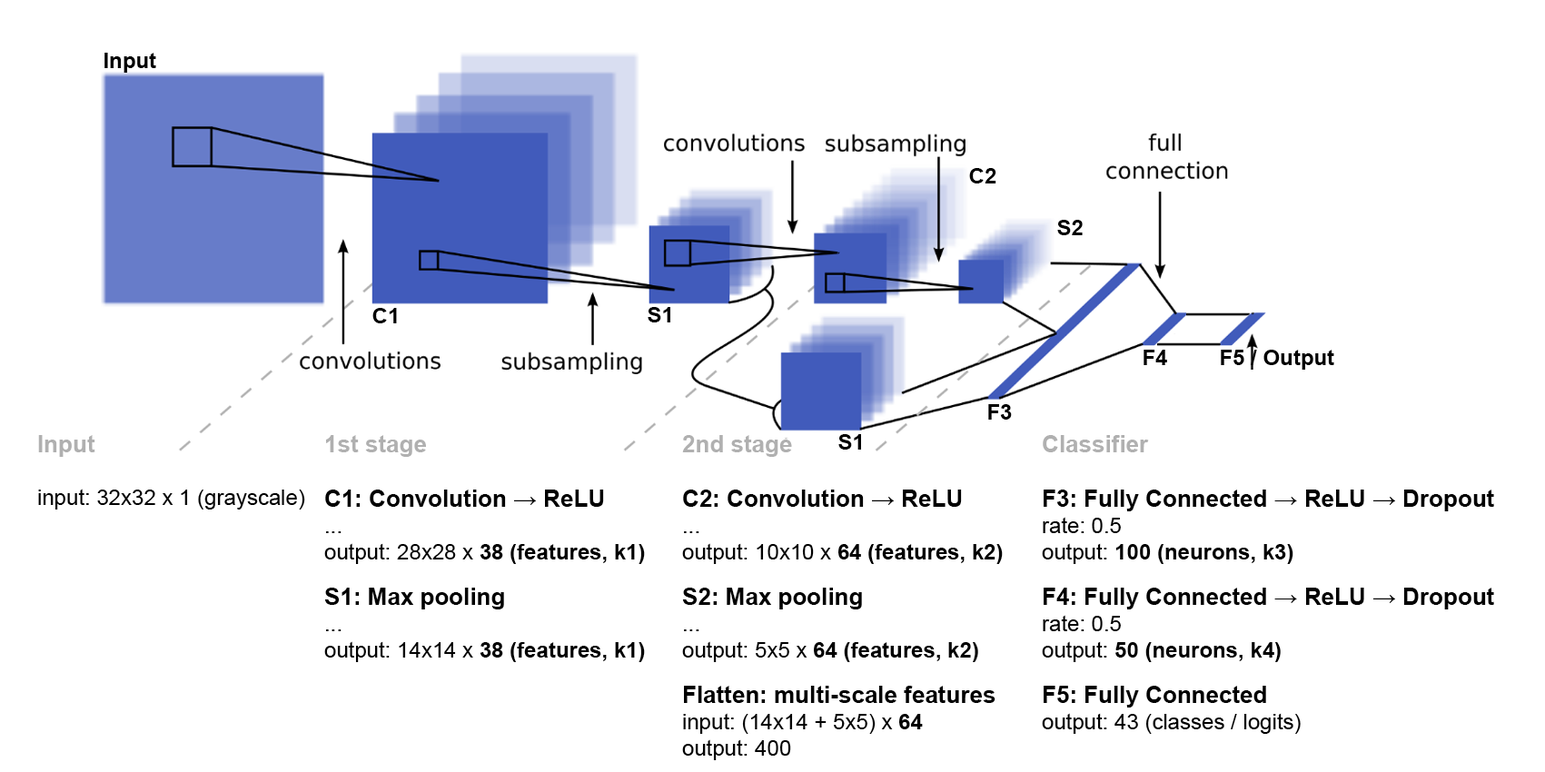
<style>
.page{position:relative;width:1545px;height:772px;background:#ffffff}
.page>*{position:absolute;margin:0}
.t1{font:10.9px "Arial-BoldMT";color:#000000}
.t2{font:21.8px "ArialMT";color:#000000}
.t3{font:23.6px "Arial-BoldMT";color:#b0b0b0}
.t4{font:23.6px "Arial-BoldMT";color:#000000}
.t5{font:21.8px "Arial-BoldMT";color:#000000}
</style>
<div class="page">
<p class="t1" style="left:104px;top:53px;width:52px;height:20px">Input</p>
<p class="t1" style="left:969px;top:168px;width:27px;height:15px">C2</p>
<p class="t1" style="left:1057px;top:220px;width:26px;height:15px">S2</p>
<p class="t1" style="left:372px;top:308px;width:25px;height:15px">C1</p>
<p class="t1" style="left:648px;top:307px;width:22px;height:15px">S1</p>
<p class="t1" style="left:1143px;top:350px;width:24px;height:15px">F4</p>
<p class="t1" style="left:1221px;top:350px;width:113px;height:20px">F5 / Output</p>
<p class="t1" style="left:988px;top:404px;width:24px;height:16px">F3</p>
<p class="t2" style="left:38px;top:435px;width:267px;height:74px"><span class="t3">Input<br></span><br>input: 32x32 x 1 (grayscale)</p>
<p class="t4" style="left:324px;top:435px;width:321px;height:227px"><span class="t3">1st stage<br><br></span>C1: Convolution → ReLU<span class="t2"><br>...<br>output: 28x28 x </span><span class="t5">38 (features, k1)<br><br></span>S1: Max pooling<span class="t2"><br>...<br>output: 14x14 x </span><span class="t5">38 (features, k1)</span></p>
<p class="t4" style="left:682px;top:435px;width:321px;height:325px"><span class="t3">2nd stage<br><br></span>C2: Convolution → ReLU<span class="t2"><br>...<br>output: 10x10 x </span><span class="t5">64 (features, k2)<br><br></span>S2: Max pooling<span class="t2"><br>...<br>output: 5x5 x </span><span class="t5">64 (features, k2)<br><br></span>Flatten: multi-scale features<br><span class="t2">input: (14x14 + 5x5) x </span><span class="t5">64<br></span><span class="t2">output: 400</span></p>
<p class="t1" style="left:838px;top:434px;width:23px;height:16px">S1</p>
<p class="t4" style="left:1042px;top:435px;width:452px;height:299px"><span class="t3">Classifier<br><br></span>F3: Fully Connected → ReLU → Dropout<br><span class="t2">rate: 0.5<br>output: </span><span class="t5">100 (neurons, k3)<br><br></span>F4: Fully Connected → ReLU → Dropout<br><span class="t2">rate: 0.5<br>output: </span><span class="t5">50 (neurons, k4)<br><br></span>F5: Fully Connected<br><span class="t2">output: 43 (classes / logits)</span></p>
</div>
